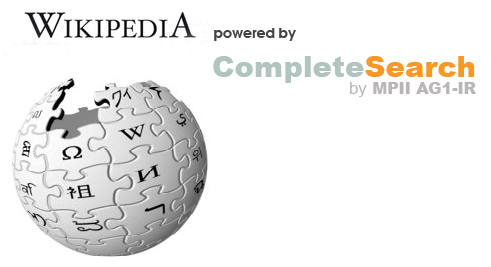
<style>
.page{position:relative;width:491px;height:267px;background:#ffffff}
.page>*{position:absolute;margin:0}
.t1{font:14px "AvantGarde-Demi";color:#444444}
.t2{font:29.2px "Arial-Black";color:#b2c4bf}
.t3{font:29.2px "Arial-Black";color:#f99826}
.t4{font:15.9px "Arial-Black";color:#b9b6b5}
.t5{font:16.7px "ArialMT";color:#b9b6b5}
</style>
<div class="page">
<p class="t1" style="left:214px;top:28px;width:82px;height:13px">powered by</p>
<p class="t2" style="left:213px;top:56px;width:262px;height:27px">Complete<span class="t3">Search</span></p>
<p class="t4" style="left:350px;top:82px;width:126px;height:15px"><span class="t5">by </span>MPII AG1-IR</p>
</div>
